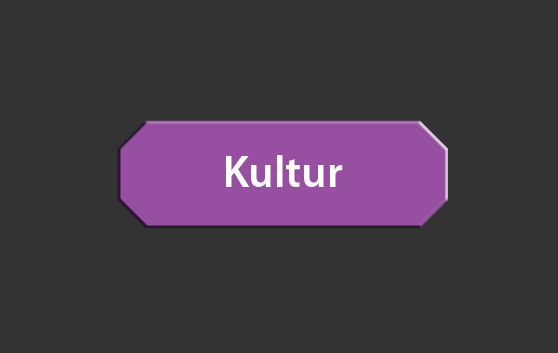
<style>
.page{position:relative;width:558px;height:353px;background:#333333}
.page>*{position:absolute;margin:0}
.t1{font:45px "MyriadPro-Semibold";color:#ffffff}
</style>
<div class="page">
<p class="t1" style="left:226px;top:155px;width:117px;height:32px">Kultur</p>
</div>
